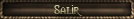
<style>
.page{position:relative;width:134px;height:19px}
.page>*{position:absolute;margin:0}
.t1{font:12px "Morpheus"}
</style>
<div class="page">
<p class="t1" style="left:54px;top:5px;width:28px;height:11px">Salir</p>
</div>
